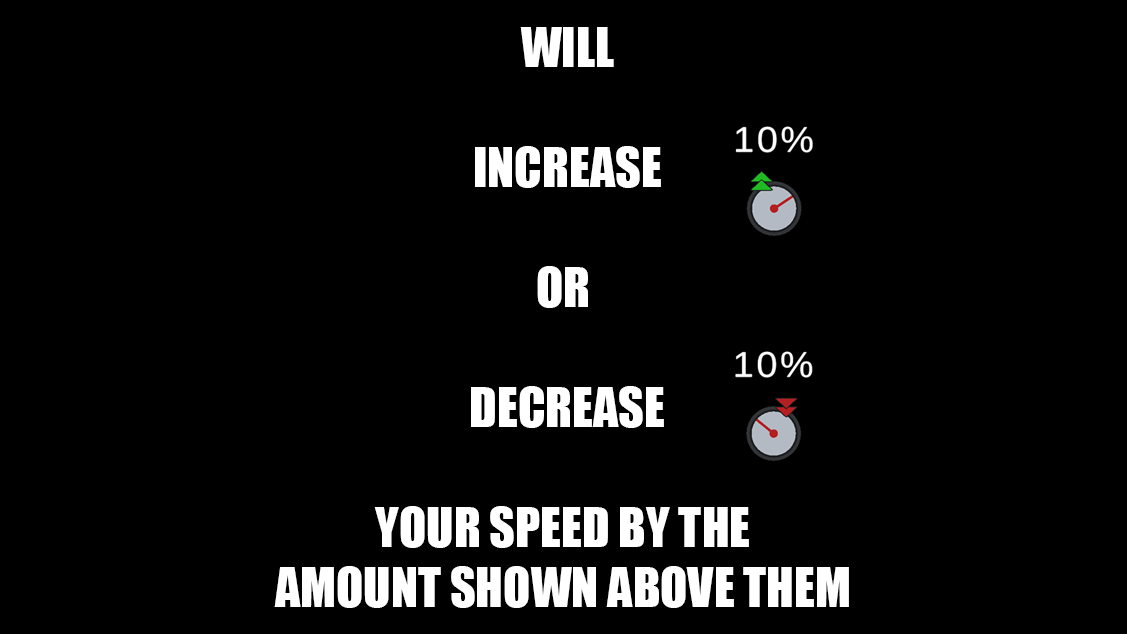
<style>
.page{position:relative;width:1127px;height:634px;background:#000000}
.page>*{position:absolute;margin:0}
.t1{font:50px "Impact";color:#ffffff;text-transform:uppercase}
</style>
<div class="page">
<p class="t1" style="left:274px;top:27px;width:575px;height:581px;text-align:center">will<br><br>increase<br><br>or <br><br>decrease<br><br>your speed by the <br>amount shown above them</p>
</div>
